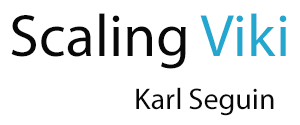
<style>
.page{position:relative;width:300px;height:125px;background:#ffffff}
.page>*{position:absolute;margin:0}
.t1{font:60px "MyriadPro-Regular";color:#080808}
.t2{font:60px "MyriadPro-Regular";color:#23a7cf}
.t3{font:30px "MyriadPro-Regular";color:#080808}
</style>
<div class="page">
<p class="t1" style="left:11px;top:13px;width:276px;height:56px">Scaling<span class="t2"> Viki</span></p>
<p class="t3" style="left:136px;top:87px;width:138px;height:29px">Karl Seguin</p>
</div>
